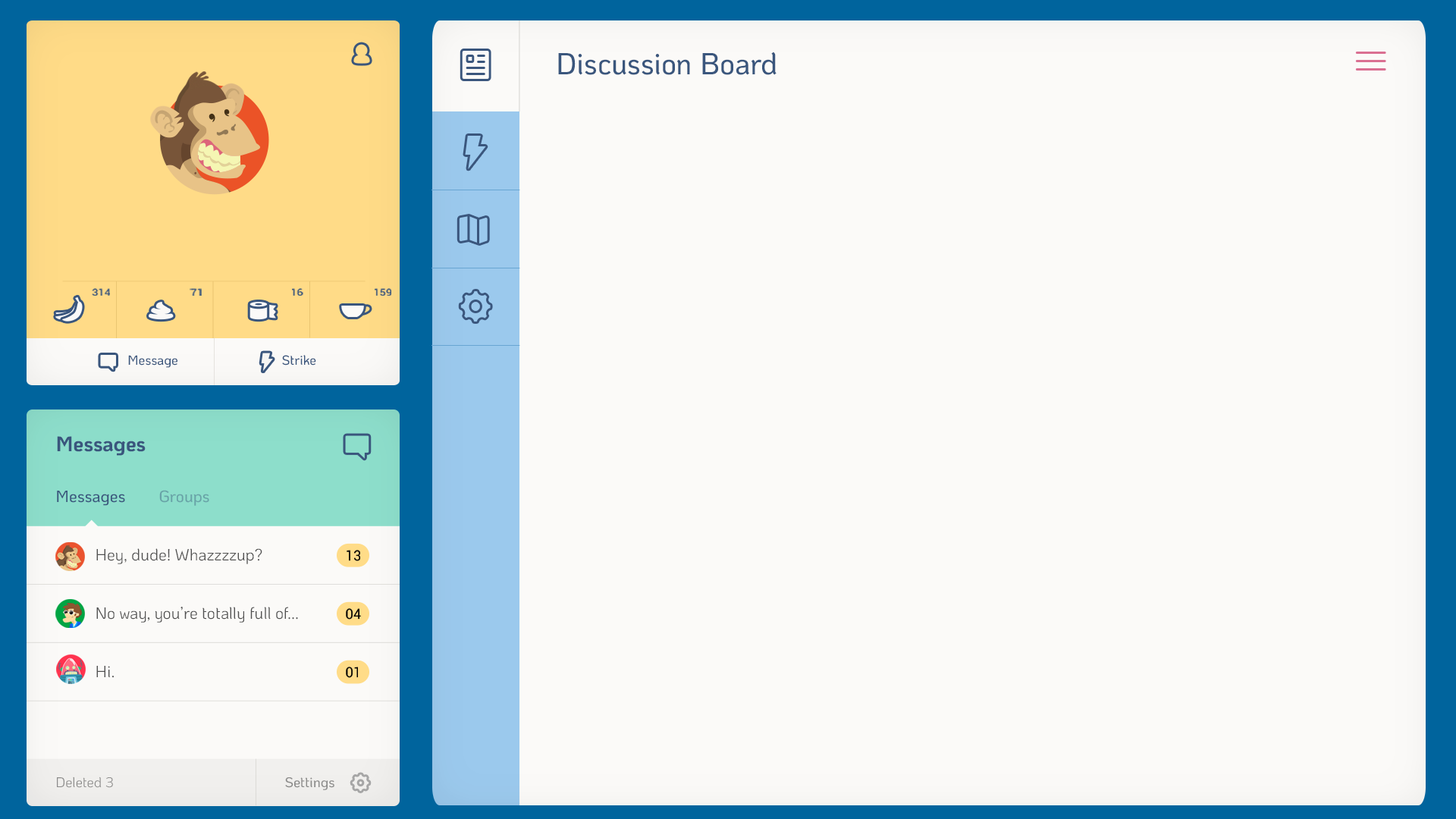
<style>
.page{position:relative;width:1456px;height:819px;background:#fbfaf8}
.page>*{position:absolute;margin:0}
.t1{font:30.3px "KoHo-Medium";color:#3a567d;scale:0.97 1}
.t2{font:9.5px "Roboto-Medium";color:#41557d;scale:1.16 1}
.t3{font:13.3px "KoHo-Medium";color:#3a567d}
.t4{font:21px "KoHo-Bold";color:#3a567d}
.t5{font:16.3px "KoHo-Medium";color:#3a567d}
.t6{font:16.3px "KoHo-Medium";color:#68a3a7}
.t7{font:16.3px/58.3px "KoHo-Regular";color:#505050}
.t8{font:14px "Roboto-Regular";color:#000000}
.t9{font:14px "KoHo-Regular";color:#8b8b8a}
.t10{font:14px "KoHo-Medium";color:#8b8b8a}
</style>
<div class="page">
<p class="t1" style="left:558px;top:52px;width:219px;height:23px">Discussion Board</p>
<p class="t2" style="left:92px;top:288px;width:18px;height:8px">314</p>
<p class="t2" style="left:190px;top:288px;width:12px;height:8px">71</p>
<p class="t2" style="left:292px;top:288px;width:11px;height:8px">16</p>
<p class="t2" style="left:375px;top:288px;width:16px;height:8px">159</p>
<p class="t3" style="left:128px;top:355px;width:49px;height:13px">Message</p>
<p class="t3" style="left:282px;top:355px;width:34px;height:11px">Strike</p>
<p class="t4" style="left:57px;top:436px;width:89px;height:20px">Messages</p>
<p class="t5" style="left:57px;top:491px;width:68px;height:15px">Messages</p>
<p class="t6" style="left:159px;top:490px;width:50px;height:16px">Groups</p>
<p class="t7" style="left:96px;top:548px;width:202px;height:130px">Hey, dude! Whazzzzup?<br>No way, you’re totally full of...<br>Hi.</p>
<p class="t8" style="left:347px;top:550px;width:13px;height:11px">13</p>
<p class="t8" style="left:346px;top:608px;width:15px;height:12px">04</p>
<p class="t8" style="left:346px;top:667px;width:12px;height:11px">01</p>
<p class="t9" style="left:57px;top:777px;width:56px;height:11px">Deleted 3</p>
<p class="t10" style="left:285px;top:777px;width:49px;height:13px">Settings</p>
</div>
